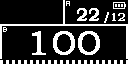
<style>
.page{position:relative;width:128px;height:64px;background:#000000}
.page>*{position:absolute;margin:0}
.t1{font:17px "BookmanOldStyle";color:#ffffff;font-weight:bold;scale:1.11 1}
.t2{font:12px "BookmanOldStyle";color:#ffffff;font-weight:bold}
.t3{font:34px "BookmanOldStyle";color:#ffffff;font-weight:bold;scale:1.18 1}
</style>
<div class="page">
<p class="t1" style="left:77px;top:8px;width:22px;height:13px">22</p>
<p class="t2" style="left:104px;top:12px;width:21px;height:11px">/12</p>
<p class="t3" style="left:32px;top:31px;width:68px;height:24px">100</p>
</div>
